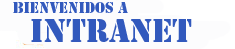
<style>
.page{position:relative;width:235px;height:49px;background:#fcfcfd}
.page>*{position:absolute;margin:0}
.t1{font:14px "StencilStd";color:#3259bd}
.t2{font:30px "StencilStd";color:#3259bd}
</style>
<div class="page">
<p class="t1" style="left:13px;top:2px;width:115px;height:11px">Bienvenidos a</p>
<p class="t2" style="left:31px;top:19px;width:161px;height:23px">INTRANET</p>
</div>
